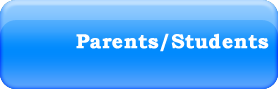
<style>
.page{position:relative;width:278px;height:89px}
.page>*{position:absolute;margin:0}
.t1{font:20px "BookmanOldStyle-Bold";color:#ffffff;font-weight:bold}
</style>
<div class="page">
<p class="t1" style="left:76px;top:33px;width:193px;height:19px">Parents/Students</p>
</div>
